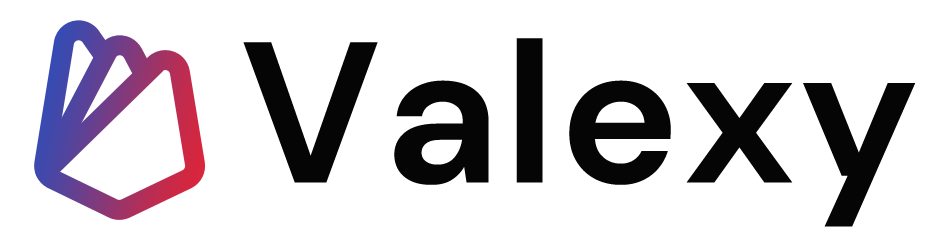
<style>
.page{position:relative;width:950px;height:240px;background:#ffffff}
.page>*{position:absolute;margin:0}
.t1{font:200px "DMSans-Bold";letter-spacing:0.02em;color:#050505}
</style>
<div class="page">
<p class="t1" style="left:243px;top:38px;width:673px;height:189px">Valexy</p>
</div>
